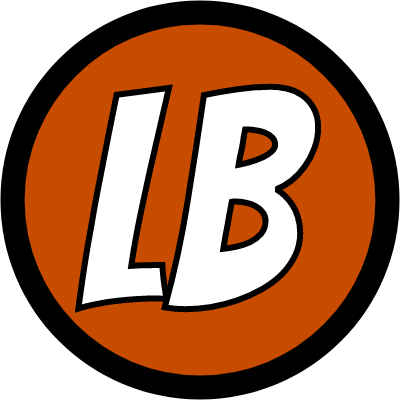
<style>
.page{position:relative;width:400px;height:400px;background:#ffffff}
.page>*{position:absolute;margin:0}
.t1{font:299px "Bangers-Regular";color:#ffffff}
.t2{font:51.3px "DejaVuSans";color:#ffffff}
</style>
<div class="page">
<p class="t1" style="left:75px;top:83px;width:247px;height:230px"><span class="t2"><br><br></span>LB</p>
</div>
